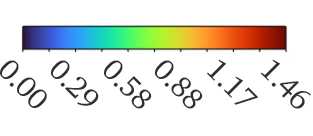
<style>
.page{position:relative;width:313px;height:136px;background:#ffffff}
.page>*{position:absolute;margin:0}
.t1{font:30px "Charter-Roman";letter-spacing:-0.02em;color:#352e31}
</style>
<div class="page">
<p class="t1" style="left:0px;top:60px;width:47px;height:48px;rotate:45deg">0.00</p>
<p class="t1" style="left:51px;top:60px;width:48px;height:46px;rotate:45deg">0.29</p>
<p class="t1" style="left:104px;top:60px;width:48px;height:49px;rotate:45deg">0.58</p>
<p class="t1" style="left:155px;top:60px;width:48px;height:49px;rotate:45deg">0.88</p>
<p class="t1" style="left:206px;top:59px;width:52px;height:46px;rotate:45deg">1.17</p>
<p class="t1" style="left:260px;top:59px;width:51px;height:50px;rotate:45deg">1.46</p>
</div>
